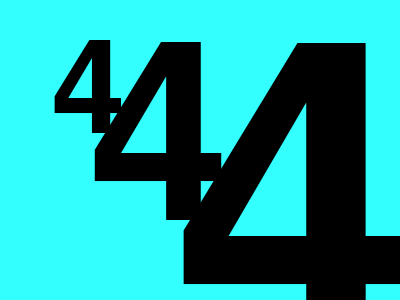
<style>
.page{position:relative;width:400px;height:300px;background:#33ffff}
.page>*{position:absolute;margin:0}
.t1{font:133.7px "Helvetica-Bold";color:#000000}
.t2{font:254.8px "Helvetica-Bold";color:#000000}
</style>
<div class="page">
<p class="t1" style="left:54px;top:40px;width:67px;height:93px">4</p>
<p class="t2" style="left:94px;top:42px;width:128px;height:178px">4</p>
</div>
